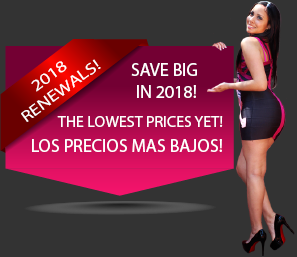
<style>
.page{position:relative;width:297px;height:257px;background:#333333}
.page>*{position:absolute;margin:0}
.t1{font:16px "MyriadPro-Regular";color:#ffffff;scale:1.22 1}
.t2{font:18px "MyriadPro-Regular";color:#ffffff}
.t3{font:16px "MyriadPro-Regular";color:#fffefe}
</style>
<div class="page">
<p class="t1" style="left:21px;top:59px;width:80px;height:63px;text-align:center;rotate:-36deg">2018 <br>RENEWALS!</p>
<p class="t2" style="left:131px;top:63px;width:66px;height:35px;text-align:center">SAVE BIG <br>IN 2018!</p>
<p class="t3" style="left:57px;top:116px;width:166px;height:11px">THE LOWEST PRICES YET!</p>
<p class="t2" style="left:32px;top:139px;width:190px;height:13px">LOS PRECIOS MAS BAJOS!</p>
</div>
